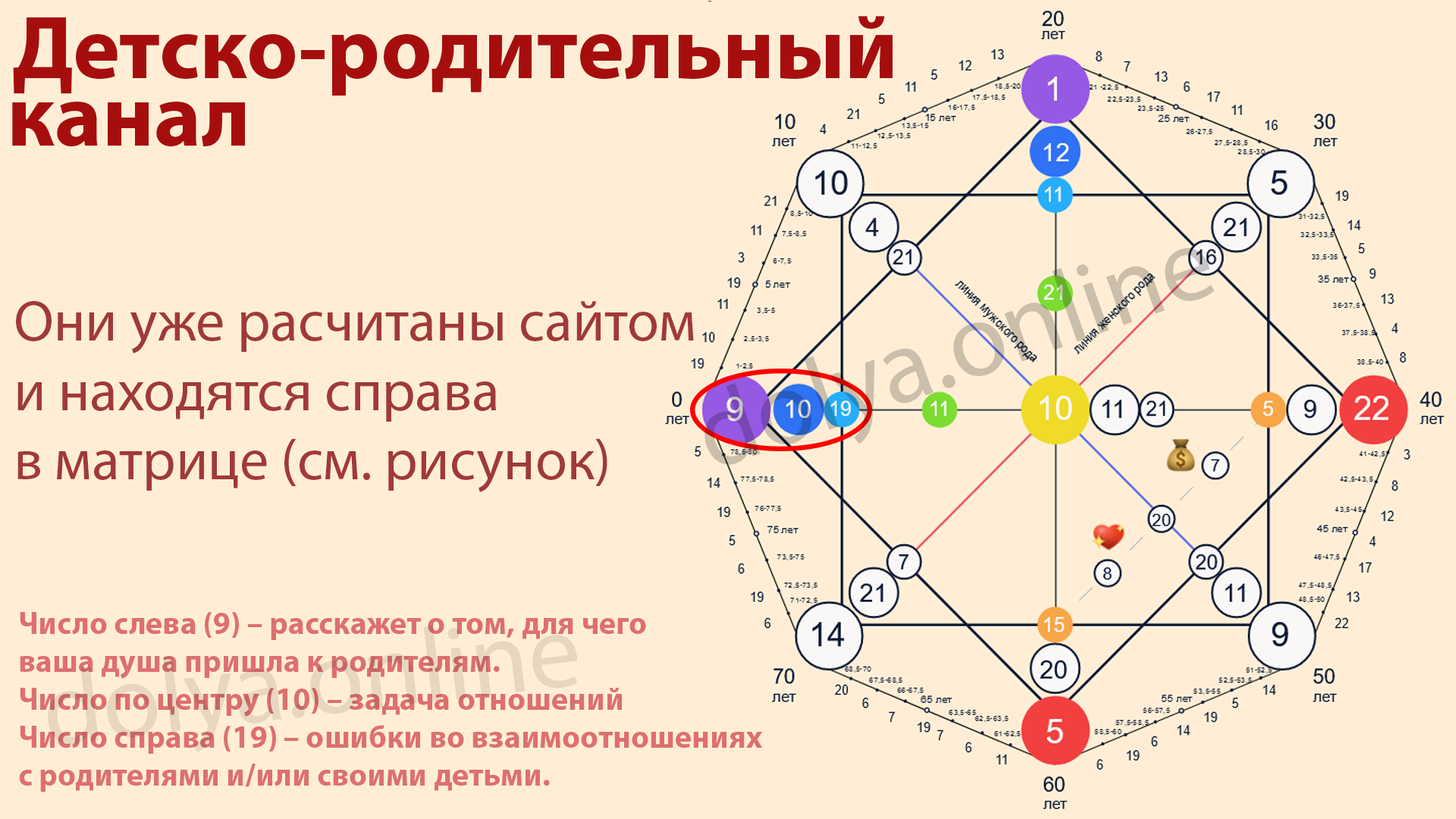
<style>
.page{position:relative;width:1456px;height:819px;background:#ffeed5}
.page>*{position:absolute;margin:0}
.t1{font:89.5px "MyriadPro-Bold";color:#a60e0e}
.t2{font:57.9px "MyriadPro-Regular";color:#a13939}
.t3{font:31.6px "MyriadPro-Bold";color:#de6f6f}
.t4{font:105.3px "MyriadPro-Regular";color:#e7d7c1}
</style>
<div class="page">
<p class="t1" style="left:13px;top:16px;width:880px;height:80px">Детско-родительный</p>
<p class="t1" style="left:12px;top:102px;width:233px;height:45px">канал</p>
<p class="t2" style="left:16px;top:301px;width:678px;height:191px">Они уже расчитаны сайтом <br>и находятся справа <br>в матрице (см. рисунок)</p>
<p class="t3" style="left:19px;top:612px;width:744px;height:180px">Число слева (9) – расскажет о том, для чего <br>ваша душа пришла к родителям. <br>Число по центру (10) – задача отношений<br>Число справа (19) – ошибки во взаимоотношениях <br>с родителями и/или своими детьми.</p>
<p class="t4" style="left:48px;top:626px;width:530px;height:126px;rotate:-7deg">dolya.online</p>
</div>
